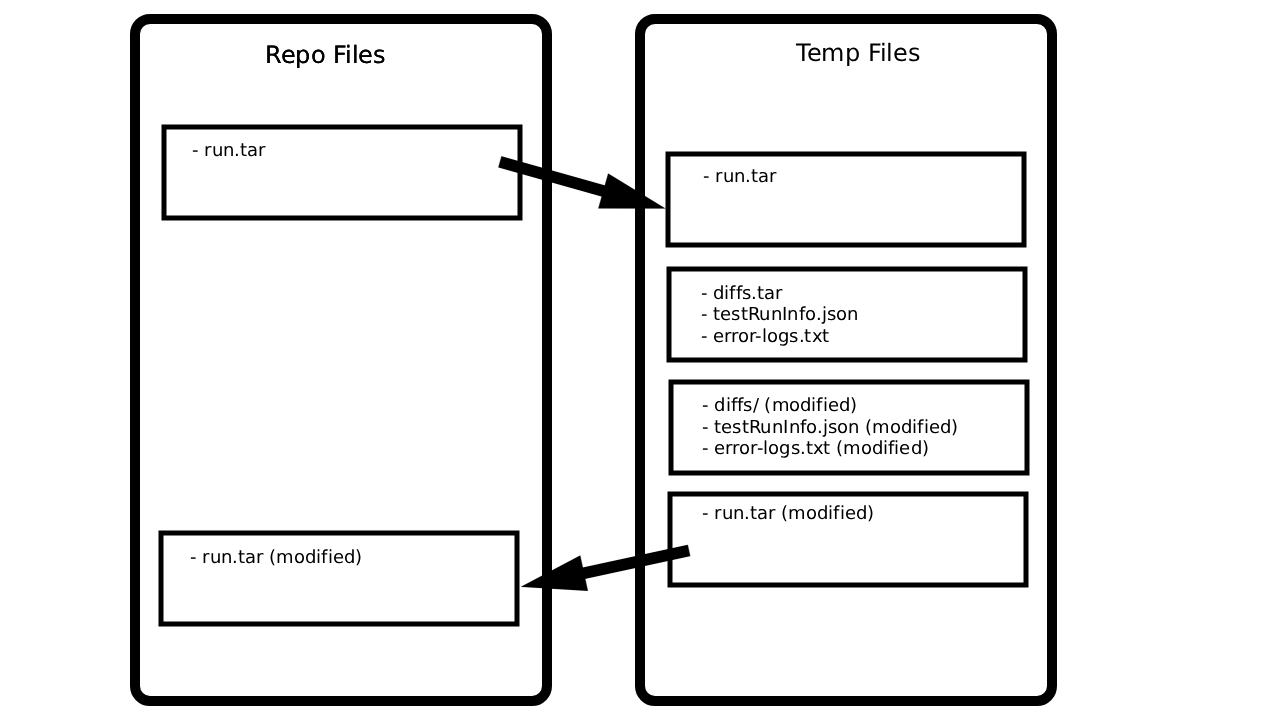
<style>
.page{position:relative;width:1280px;height:720px;background:#ffffff}
.page>*{position:absolute;margin:0}
.t1{font:24px "DejaVuSans";color:#000000}
.t2{font:18px "DejaVuSans";color:#000000}
</style>
<div class="page">
<p class="t1" style="left:267px;top:44px;width:118px;height:24px">Repo Files</p>
<p class="t1" style="left:267px;top:44px;width:118px;height:24px">Repo Files</p>
<p class="t1" style="left:795px;top:42px;width:125px;height:24px">Temp Files</p>
<p class="t2" style="left:192px;top:143px;width:74px;height:14px">- run.tar</p>
<p class="t2" style="left:703px;top:169px;width:74px;height:14px">- run.tar</p>
<p class="t2" style="left:701px;top:285px;width:156px;height:61px">- diffs.tar<br>- testRunInfo.json<br>- error-logs.txt</p>
<p class="t2" style="left:702px;top:397px;width:255px;height:61px">- diffs/ (modified)<br>- testRunInfo.json (modified)<br>- error-logs.txt (modified)</p>
<p class="t2" style="left:702px;top:505px;width:171px;height:17px">- run.tar (modified)</p>
<p class="t2" style="left:190px;top:549px;width:171px;height:17px">- run.tar (modified)</p>
</div>
